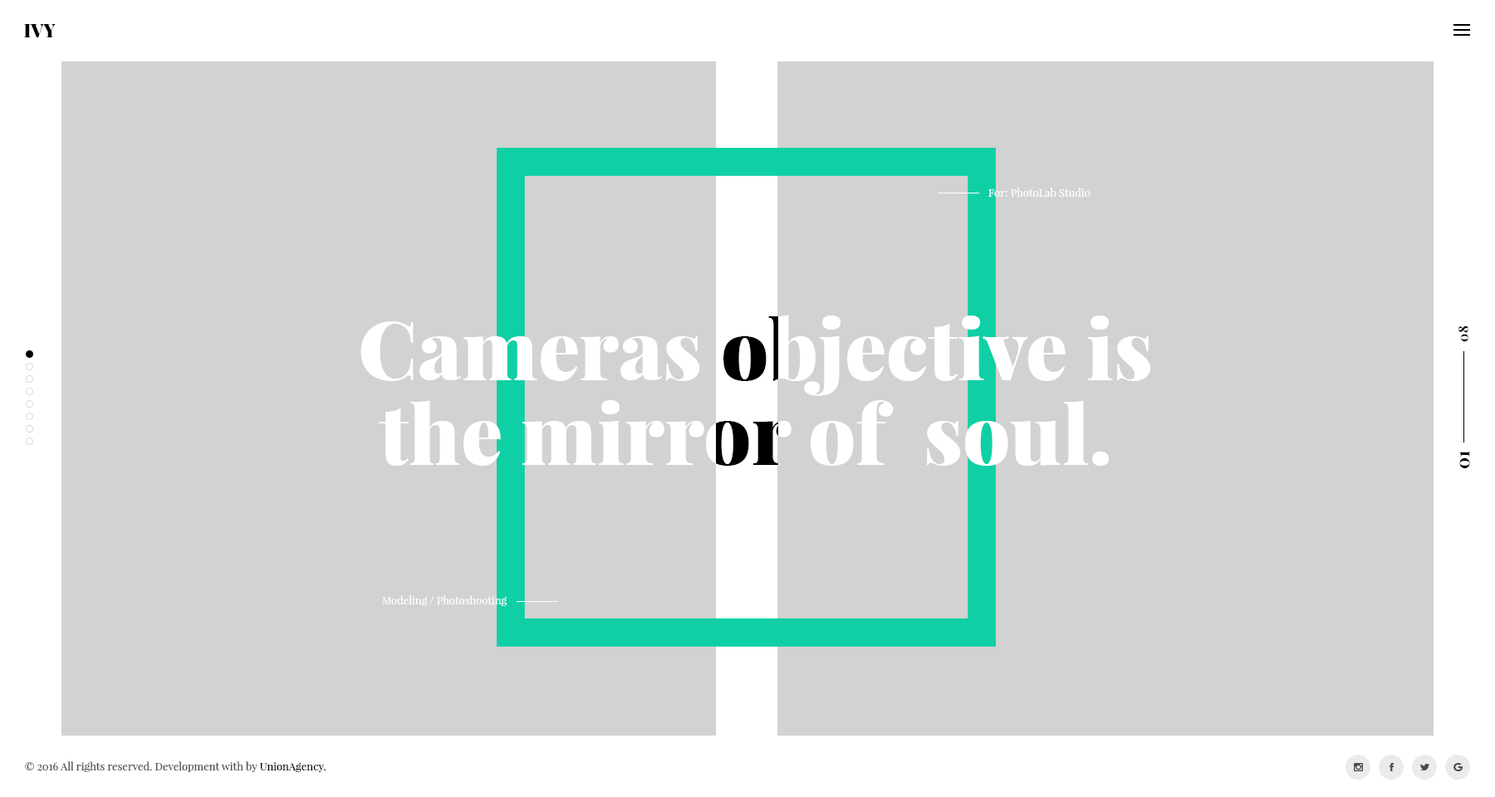
<style>
.page{position:relative;width:1495px;height:797px;background:#d2d2d2}
.page>*{position:absolute;margin:0}
.t1{font:18.3px "PlayfairDisplay-Black";color:#000000}
.t2{font:10.8px "PlayfairDisplay-Regular";color:#ffffff}
.t3{font:13.2px "PlayfairDisplay-Bold";color:#000000}
.t4{font:18.2px "PlayfairDisplay-Bold";color:#000000}
.t5{font:10.8px "PlayfairDisplay-Regular";color:#494949}
.t6{font:10.8px "PlayfairDisplay-Regular";color:#000000}
</style>
<div class="page">
<p class="t1" style="left:24px;top:24px;width:32px;height:13px">IVY</p>
<p class="t2" style="left:989px;top:188px;width:102px;height:9px">For: PhotoLab Studio</p>
<p class="t3" style="left:1459px;top:326px;width:10px;height:16px;rotate:-90deg">08</p>
<p class="t4" style="left:1460px;top:451px;width:10px;height:18px;rotate:-90deg">01</p>
<p class="t2" style="left:382px;top:596px;width:126px;height:10px">Modeling / Photoshooting</p>
<p class="t5" style="left:25px;top:762px;width:301px;height:11px">© 2016 All rights reserved. Development with by <span class="t6">UnionAgency.</span></p>
</div>
